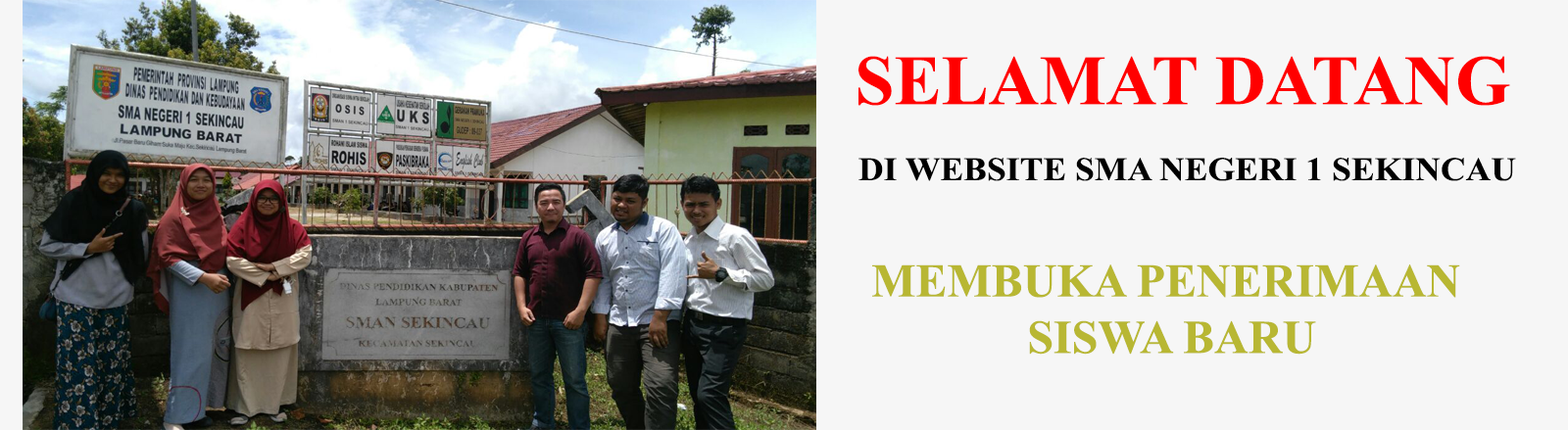
<style>
.page{position:relative;width:1568px;height:430px;background:#f6f6f6}
.page>*{position:absolute;margin:0}
.t1{font:70.6px "TimesNewRomanPS-BoldMT";color:#ff0000}
.t2{font:33px "TimesNewRomanPS-BoldMT";color:#000000;scale:1.06 1}
.t3{font:47px "TimesNewRomanPS-BoldMT";color:#b8b733}
</style>
<div class="page">
<p class="t1" style="left:858px;top:56px;width:652px;height:50px">SELAMAT DATANG</p>
<p class="t2" style="left:858px;top:158px;width:658px;height:23px">DI WEBSITE SMA NEGERI 1 SEKINCAU</p>
<p class="t3" style="left:872px;top:265px;width:588px;height:90px;text-align:center">MEMBUKA PENERIMAAN <br>SISWA BARU</p>
</div>
